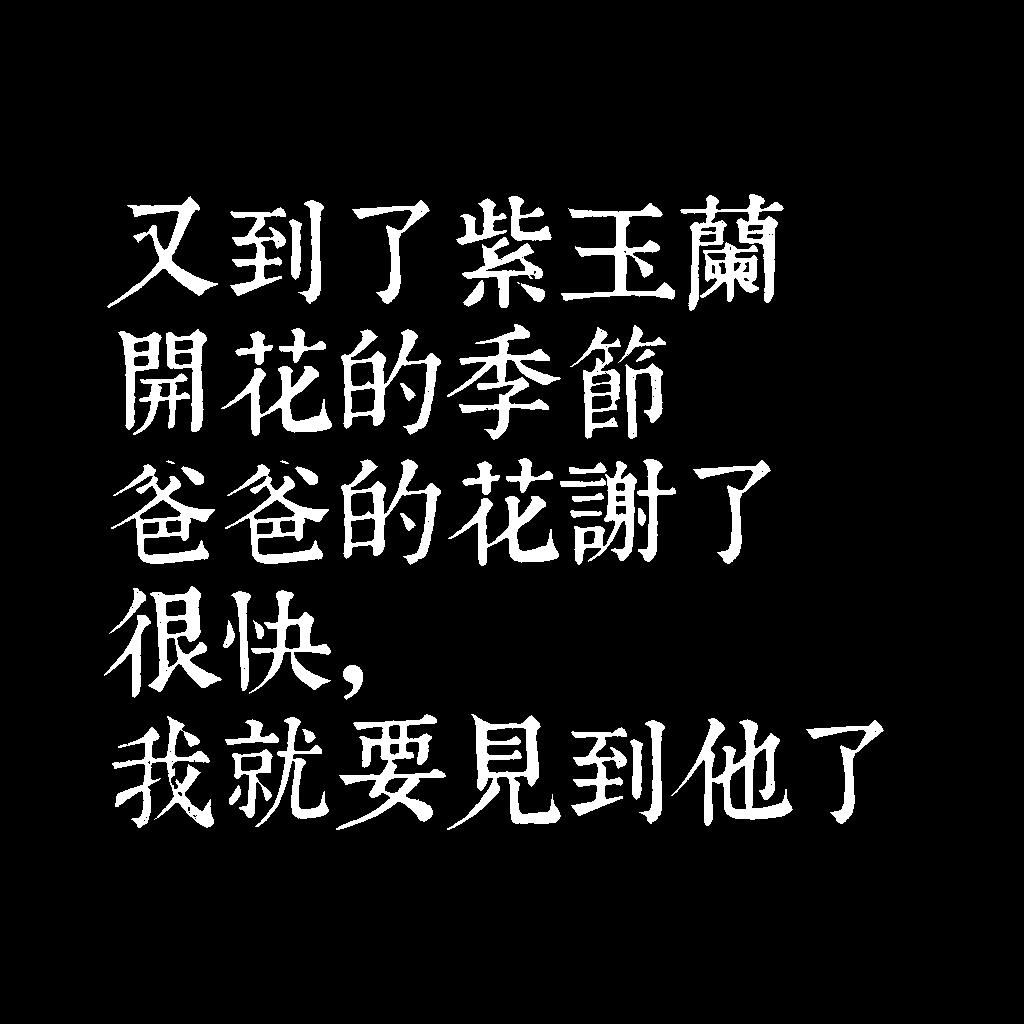
<style>
.page{position:relative;width:1024px;height:1024px;background:#000000}
.page>*{position:absolute;margin:0}
.t1{font:116px/130px "TpldKhangXiDictTrial";letter-spacing:-0.02em;color:#ffffff}
</style>
<div class="page">
<p class="t1" style="left:104px;top:194px;width:780px;height:636px">又到了紫玉蘭<br>開花的季節<br>爸爸的花謝了<br>很快，<br>我就要見到他了</p>
</div>
